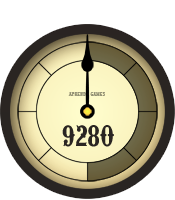
<style>
.page{position:relative;width:175px;height:200px;background:#ffffff}
.page>*{position:absolute;margin:0}
.t1{font:6px "URWWoodTypD";color:#939174}
.t2{font:31px "URWWoodTypD";color:#2a2522;text-transform:uppercase}
</style>
<div class="page">
<p class="t1" style="left:68px;top:92px;width:37px;height:4px">APRENDA games</p>
<p class="t2" style="left:62px;top:125px;width:52px;height:22px">9280</p>
</div>
